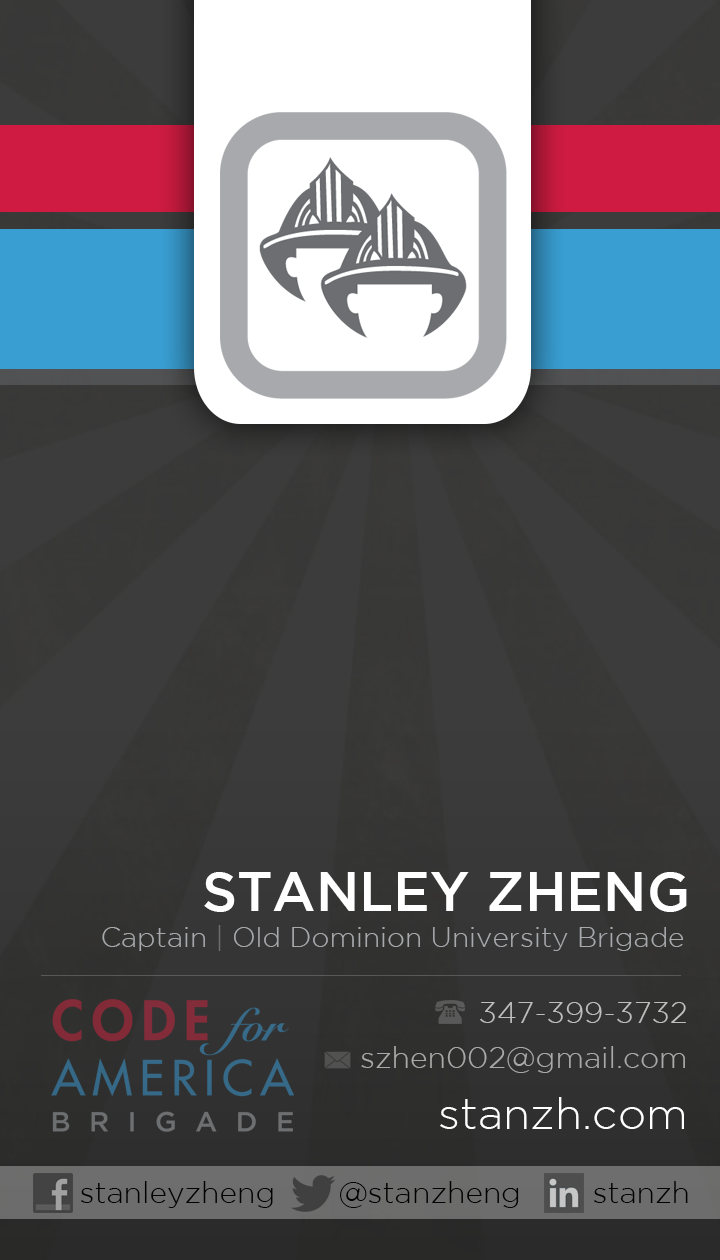
<style>
.page{position:relative;width:720px;height:1260px}
.page>*{position:absolute;margin:0}
.t1{font:55px "GothamMedium";color:#ffffff}
.t2{font:28px "GothamLight";color:#a7a9ac}
.t3{font:28px "GothamLight";color:#6d6e71}
.t4{font:30px "GothamLight";color:#bebebe}
.t5{font:30px "GothamLight";color:#a9a9a9}
.t6{font:44.2px "GothamLight";color:#ffffff}
.t7{font:30px "GothamLight";color:#000000}
</style>
<div class="page">
<p class="t1" style="left:204px;top:872px;width:483px;height:40px">STANLEY ZHENG</p>
<p class="t2" style="left:102px;top:925px;width:582px;height:26px">Captain <span class="t3">|</span> Old Dominion University Brigade</p>
<p class="t4" style="left:480px;top:1002px;width:206px;height:21px">347-399-3732</p>
<p class="t5" style="left:361px;top:1046px;width:324px;height:27px">szhen002@gmail.com</p>
<p class="t6" style="left:440px;top:1097px;width:244px;height:32px">stanzh.com</p>
<p class="t7" style="left:81px;top:1181px;width:607px;height:27px">stanleyzheng       @stanzheng        stanzh</p>
</div>
